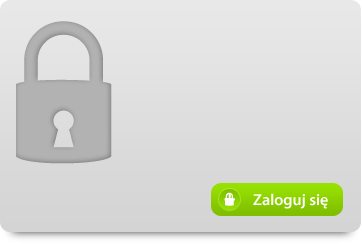
<style>
.page{position:relative;width:362px;height:244px}
.page>*{position:absolute;margin:0}
.t1{font:20.6px "MyriadPro-Bold";color:#ffffff}
.t2{font:16px "MyriadPro-Semibold";color:#ffffff}
</style>
<div class="page">
<p class="t1" style="left:224px;top:194px;width:11px;height:11px">+</p>
<p class="t2" style="left:253px;top:193px;width:75px;height:16px">Zaloguj się</p>
</div>
